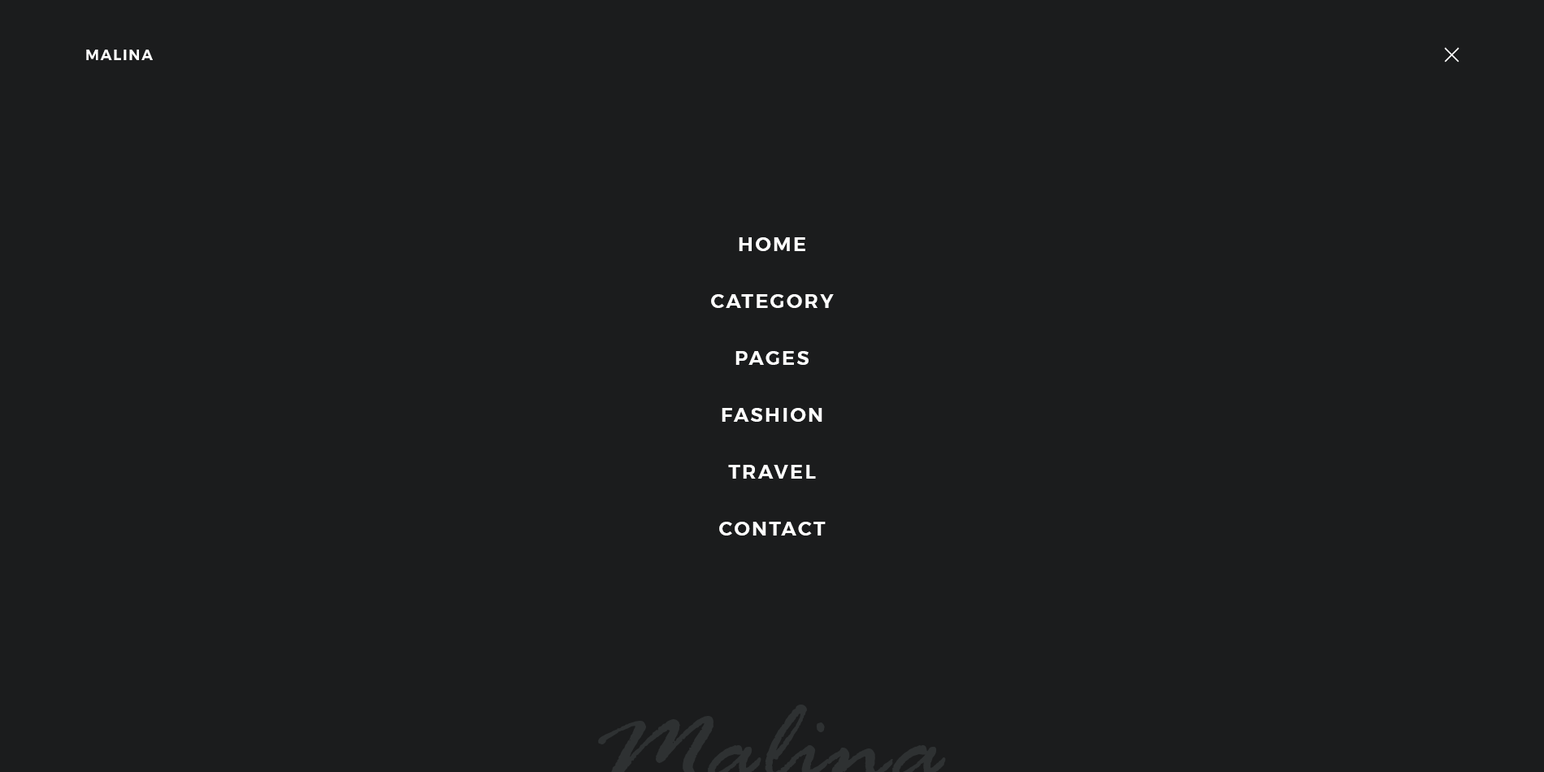
<style>
.page{position:relative;width:1544px;height:772px;background:#1b1c1d}
.page>*{position:absolute;margin:0}
.t1{font:14.6px "Montserrat-SemiBold";letter-spacing:0.1em;color:#ffffff;text-transform:uppercase}
.t2{font:19.5px/56.9px "Montserrat-SemiBold";letter-spacing:0.1em;color:#ffffff;text-transform:uppercase}
</style>
<div class="page">
<p class="t1" style="left:86px;top:50px;width:67px;height:10px">Malina</p>
<p class="t2" style="left:711px;top:237px;width:123px;height:299px;text-align:center">Home<br>Category<br>Pages<br>Fashion<br>Travel<br>Contact</p>
</div>
